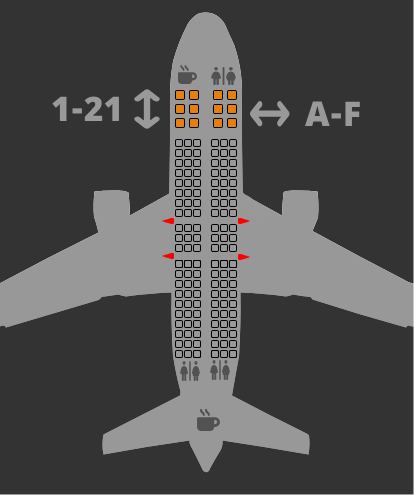
<style>
.page{position:relative;width:414px;height:495px;background:#333333}
.page>*{position:absolute;margin:0}
.t1{font:34px "NotoSansDevanagari-Black";color:#999999}
</style>
<div class="page">
<p class="t1" style="left:52px;top:96px;width:67px;height:25px">1-21</p>
<p class="t1" style="left:305px;top:101px;width:55px;height:25px">A-F</p>
</div>
